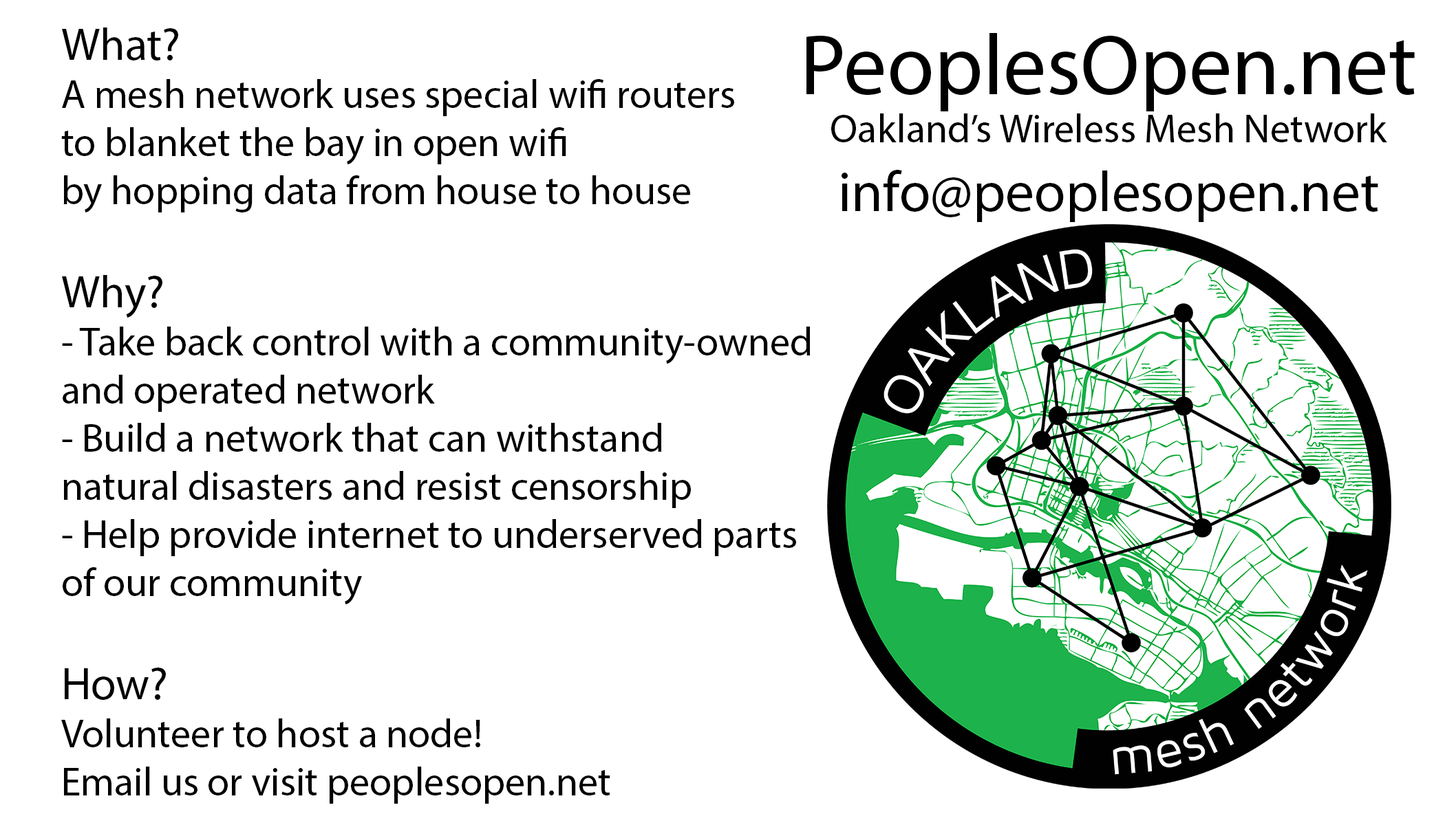
<style>
.page{position:relative;width:1445px;height:825px;background:#ffffff}
.page>*{position:absolute;margin:0}
.t1{font:40.1px "MyriadPro-Regular";color:#000000}
.t2{font:45.9px "MyriadPro-Regular";color:#000000}
.t3{font:86px "MyriadPro-Regular";color:#000000}
.t4{font:57.3px "MyriadPro-Regular";color:#000000}
</style>
<div class="page">
<p class="t1" style="left:61px;top:28px;width:749px;height:776px"><span class="t2">What?<br></span>A mesh network uses special wifi routers<br>to blanket the bay in open wifi<br>by hopping data from house to house<br><br><span class="t2">Why?<br></span>- Take back control with a community-owned<br>and operated network<br>- Build a network that can withstand<br>natural disasters and resist censorship <br>- Help provide internet to underserved parts<br>of our community<br><br><span class="t2">How?<br></span>Volunteer to host a node!<br>Email us or visit peoplesopen.net</p>
<p class="t1" style="left:806px;top:33px;width:608px;height:189px;text-align:center"><span class="t3">PeoplesOpen.net<br></span>Oakland’s Wireless Mesh Network<br><span class="t4">info@peoplesopen.net</span></p>
</div>
